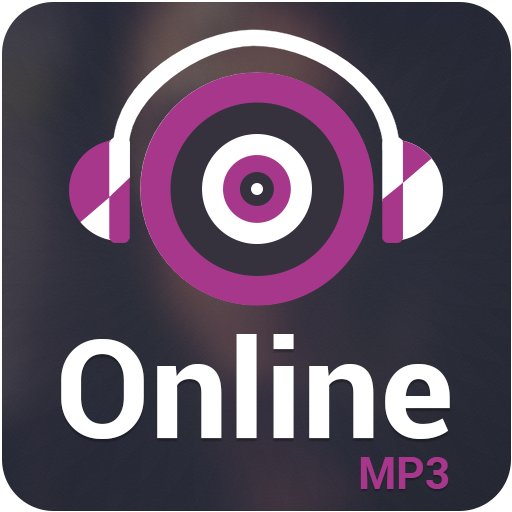
<style>
.page{position:relative;width:512px;height:512px}
.page>*{position:absolute;margin:0}
.t1{font:137.1px "Roboto-Bold";color:#ffffff}
.t2{font:43.7px "Roboto-Bold";color:#a7378b;text-transform:uppercase}
</style>
<div class="page">
<p class="t1" style="left:61px;top:334px;width:389px;height:105px">Online</p>
<p class="t2" style="left:360px;top:457px;width:89px;height:32px">Mp3</p>
</div>
